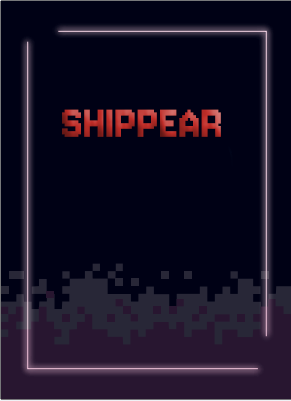
<style>
.page{position:relative;width:291px;height:401px;background:#000115}
.page>*{position:absolute;margin:0}
.t1{font:50px "Jersey10-Regular";letter-spacing:0.025em}
</style>
<div class="page">
<p class="t1" style="left:62px;top:109px;width:159px;height:28px">SHIPPEAR</p>
</div>
